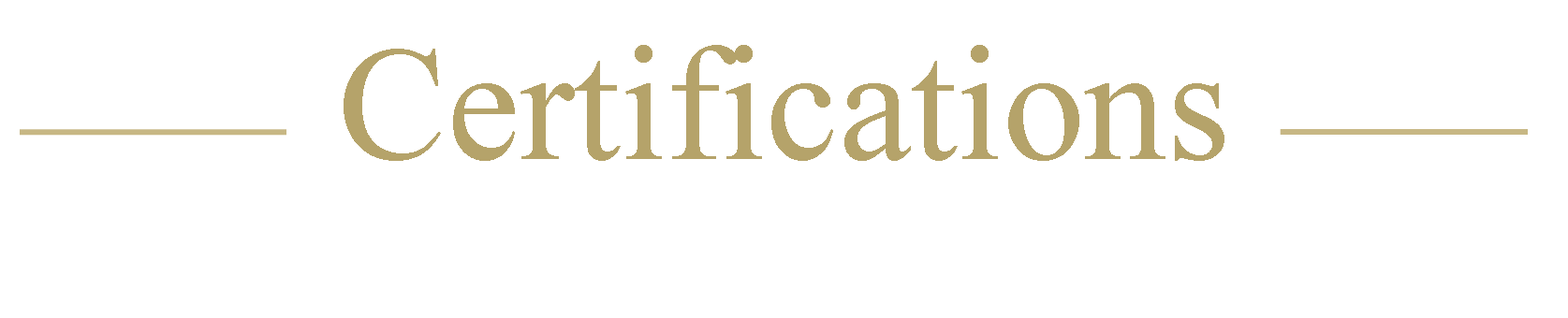
<style>
.page{position:relative;width:1568px;height:318px;background:#ffffff}
.page>*{position:absolute;margin:0}
.t1{font:163.8px "TimesNewRomanPSMT";color:#b5a36a}
</style>
<div class="page">
<p class="t1" style="left:344px;top:45px;width:880px;height:116px">Certifications</p>
</div>
